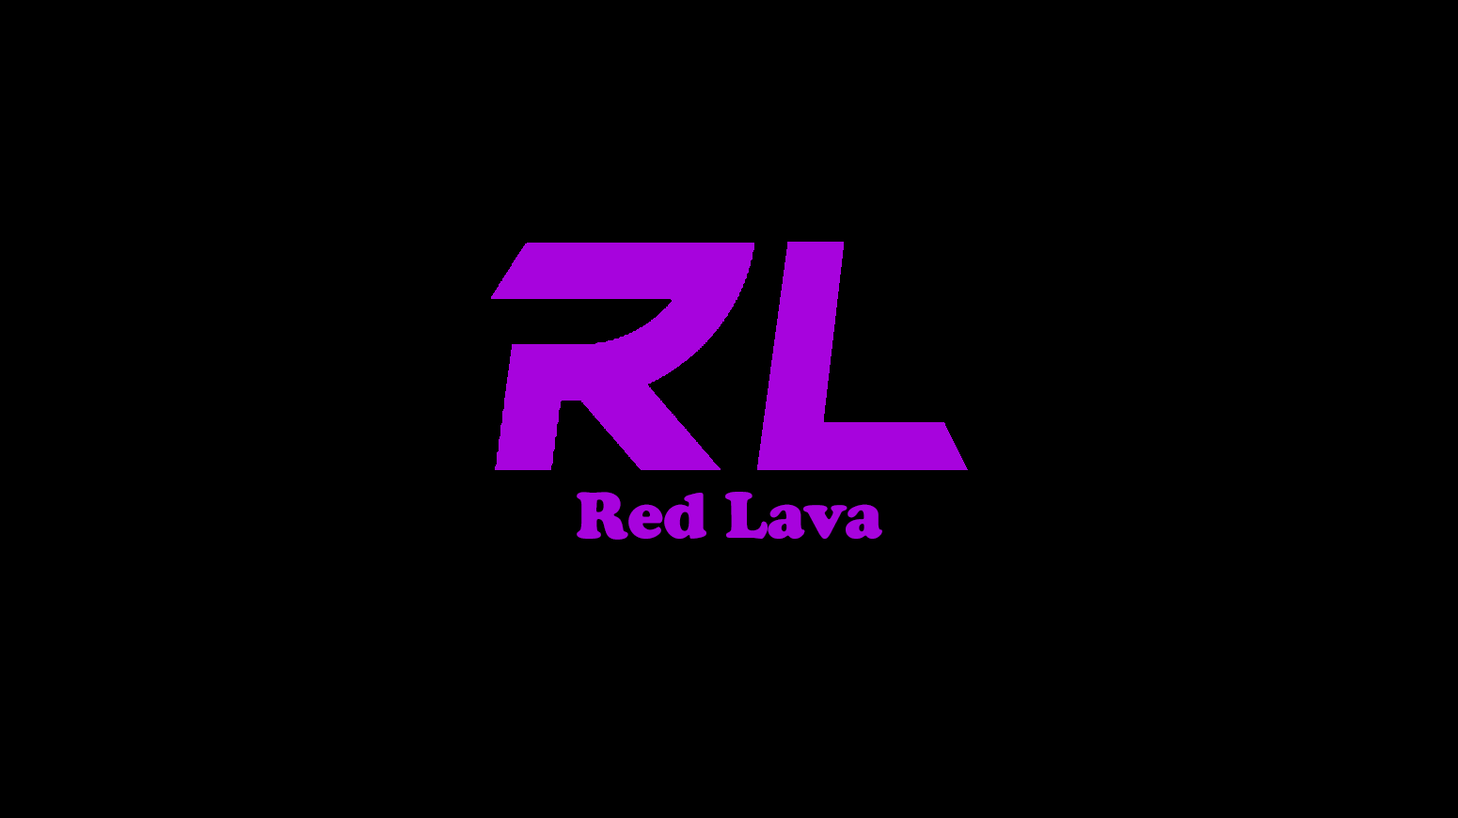
<style>
.page{position:relative;width:1458px;height:818px;background:#000000}
.page>*{position:absolute;margin:0}
.t1{font:67.7px "CooperBlack";color:#a703dd}
</style>
<div class="page">
<p class="t1" style="left:576px;top:492px;width:306px;height:48px">Red Lava</p>
</div>
